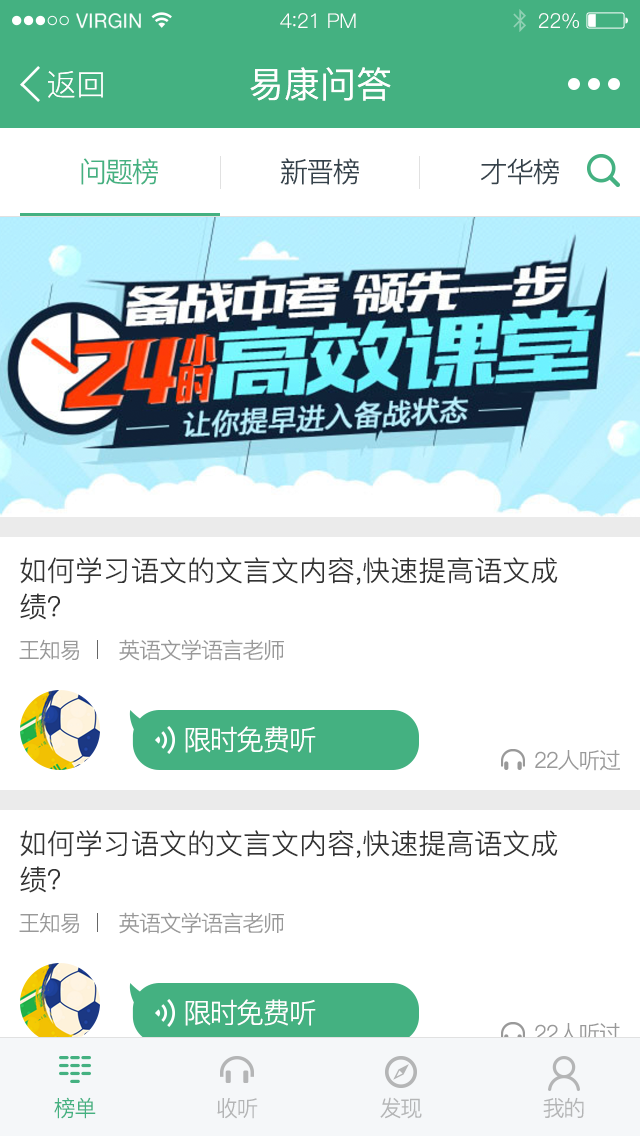
<style>
.page{position:relative;width:640px;height:1136px;background:#ffffff}
.page>*{position:absolute;margin:0}
.t1{font:19.6px "HelveticaNeue";letter-spacing:0.02em;color:#ffffff}
.t2{font:20.4px "PingFang-SC-Regular";letter-spacing:-0.02em;color:#ffffff}
.t3{font:22.1px "PingFang-SC-Regular";letter-spacing:-0.02em;color:#ffffff}
.t4{font:30px "PingFang-SC-Regular";color:#ffffff}
.t5{font:36px "PingFang-SC-Medium";color:#ffffff}
.t6{font:28px "PingFang-SC-Regular";letter-spacing:-0.06em;color:#44b181}
.t7{font:28px "PingFang-SC-Regular";letter-spacing:-0.06em;color:#35424b}
.t8{font:28px/36px "PingFang-SC-Regular";color:#333333}
.t9{font:22px "PingFang-SC-Regular";letter-spacing:-0.06em;color:#999999}
.t10{font:28px "PingFang-SC-Regular";letter-spacing:-0.06em;color:#ffffff}
.t11{font:22px "PingFang-SC-Regular";letter-spacing:-0.06em;color:#44b181}
.t12{font:22px "PingFang-SC-Regular";letter-spacing:-0.06em;color:#b4b5b6}
</style>
<div class="page">
<p class="t1" style="left:76px;top:13px;width:65px;height:16px">VIRGIN</p>
<p class="t2" style="left:280px;top:13px;width:76px;height:15px">4<span class="t3">:</span>21 PM</p>
<p class="t2" style="left:539px;top:13px;width:40px;height:16px">22%</p>
<p class="t4" style="left:48px;top:71px;width:55px;height:27px">返回</p>
<p class="t5" style="left:250px;top:67px;width:141px;height:34px">易康问答</p>
<p class="t6" style="left:81px;top:158px;width:77px;height:27px">问题榜</p>
<p class="t7" style="left:280px;top:158px;width:79px;height:27px">新晋榜</p>
<p class="t7" style="left:481px;top:158px;width:78px;height:27px">才华榜</p>
<p class="t8" style="left:20px;top:557px;width:538px;height:63px">如何学习语文的文言文内容,快速提高语文成<br>绩？</p>
<p class="t9" style="left:19px;top:639px;width:60px;height:21px">王知易</p>
<p class="t9" style="left:119px;top:639px;width:165px;height:22px">英语文学语言老师</p>
<p class="t10" style="left:185px;top:726px;width:131px;height:27px">限时免费听</p>
<p class="t9" style="left:535px;top:750px;width:85px;height:21px">22人听过</p>
<p class="t8" style="left:20px;top:830px;width:538px;height:63px">如何学习语文的文言文内容,快速提高语文成<br>绩？</p>
<p class="t9" style="left:19px;top:912px;width:60px;height:21px">王知易</p>
<p class="t9" style="left:119px;top:912px;width:165px;height:22px">英语文学语言老师</p>
<p class="t10" style="left:185px;top:999px;width:131px;height:27px">限时免费听</p>
<p class="t9" style="left:535px;top:1023px;width:85px;height:21px">22人听过</p>
<p class="t11" style="left:54px;top:1097px;width:42px;height:22px">榜单</p>
<p class="t12" style="left:380px;top:1097px;width:42px;height:22px">发现</p>
<p class="t12" style="left:543px;top:1097px;width:41px;height:21px">我的</p>
<p class="t12" style="left:217px;top:1098px;width:41px;height:21px">收听</p>
</div>
